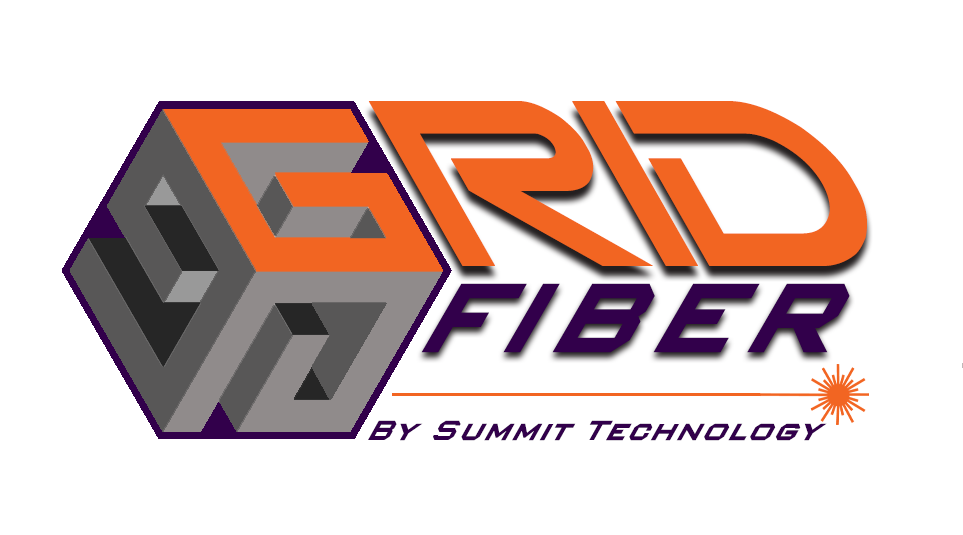
<style>
.page{position:relative;width:963px;height:535px;background:#ffffff}
.page>*{position:absolute;margin:0}
.t1{font:271.1px "GtekNova";color:#f26522;scale:0.87 1}
.t2{font:152.5px "Nexstar-BoldA";color:#32004b;scale:0.87 1}
.t3{font:43px "Nexstar-BoldA";color:#32004b;scale:0.87 1}
</style>
<div class="page">
<p class="t1" style="left:368px;top:101px;width:499px;height:165px">RID</p>
<p class="t2" style="left:421px;top:283px;width:429px;height:70px">FIBER</p>
<p class="t3" style="left:368px;top:420px;width:459px;height:21px">By Summit Technology</p>
</div>
